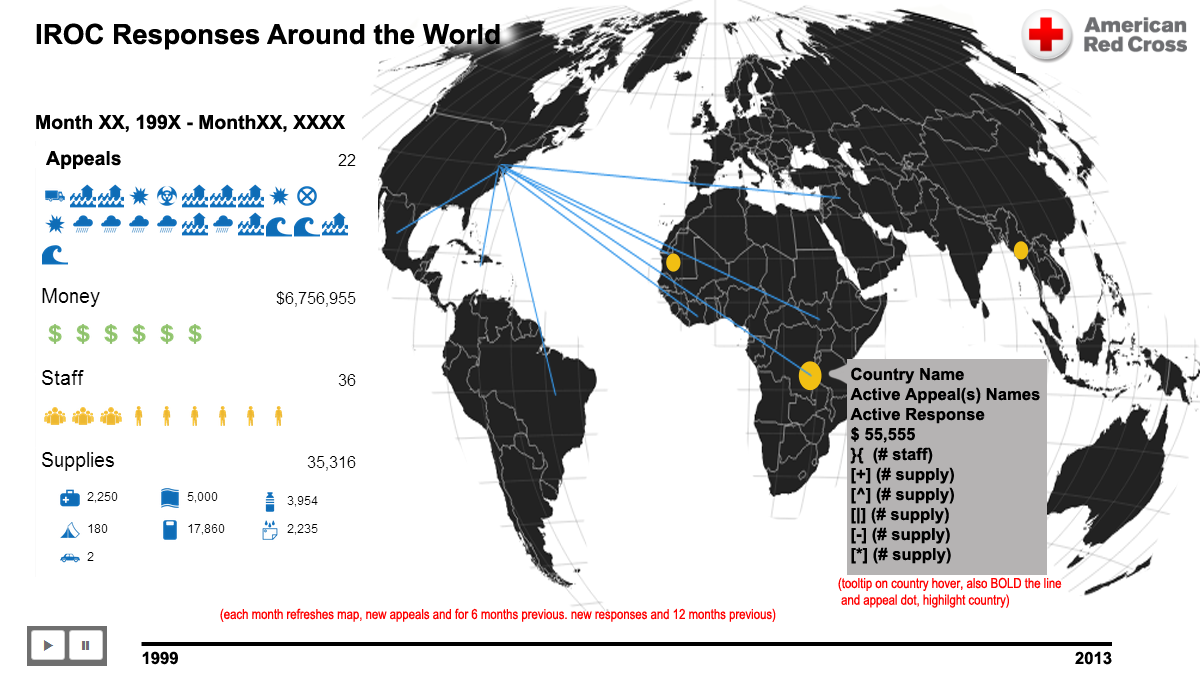
<style>
.page{position:relative;width:1200px;height:675px;background:#ffffff}
.page>*{position:absolute;margin:0}
.t1{font:27.8px "Arial-BoldMT";color:#000000}
.t2{font:19.4px "Arial-BoldMT";color:#000000}
.t3{font:16.7px "Arial-BoldMT";color:#000000}
.t4{font:13.9px "ArialNarrow";color:#ff0000}
</style>
<div class="page">
<p class="t1" style="left:36px;top:23px;width:464px;height:27px">IROC Responses Around the World</p>
<p class="t2" style="left:36px;top:114px;width:310px;height:19px">Month XX, 199X - MonthXX, XXXX</p>
<p class="t3" style="left:850px;top:367px;width:190px;height:197px">Country Name<br>Active Appeal(s) Names<br>Active Response<br>$ 55,555<br>}{  (# staff)<br>[+] (# supply)<br>[^] (# supply)<br>[|] (# supply)<br>[-] (# supply)<br>[*] (# supply)</p>
<p class="t4" style="left:838px;top:577px;width:224px;height:31px">(tooltip on country hover, also BOLD the line<br> and appeal dot, highilght country)</p>
<p class="t4" style="left:220px;top:608px;width:556px;height:14px">(each month refreshes map, new appeals and for 6 months previous. new responses and 12 months previous)</p>
<p class="t3" style="left:142px;top:651px;width:36px;height:14px">1999</p>
<p class="t3" style="left:1075px;top:651px;width:37px;height:14px">2013</p>
</div>
